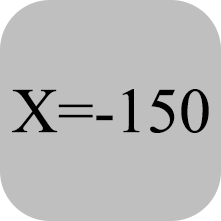
<style>
.page{position:relative;width:221px;height:221px;background:#bfbfbf}
.page>*{position:absolute;margin:0}
.t1{font:63.9px "TimesNewRomanPSMT";color:#000000}
</style>
<div class="page">
<p class="t1" style="left:12px;top:89px;width:197px;height:44px">X=-150</p>
</div>
